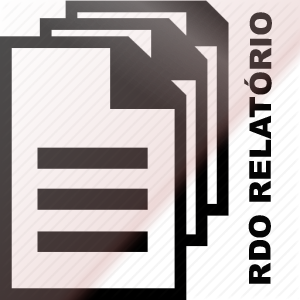
<style>
.page{position:relative;width:300px;height:300px}
.page>*{position:absolute;margin:0}
.t1{font:30px "Arial-Black";color:#040404}
</style>
<div class="page">
<p class="t1" style="left:244px;top:12px;width:28px;height:272px;rotate:-90deg">RDO RELATÓRIO</p>
</div>
